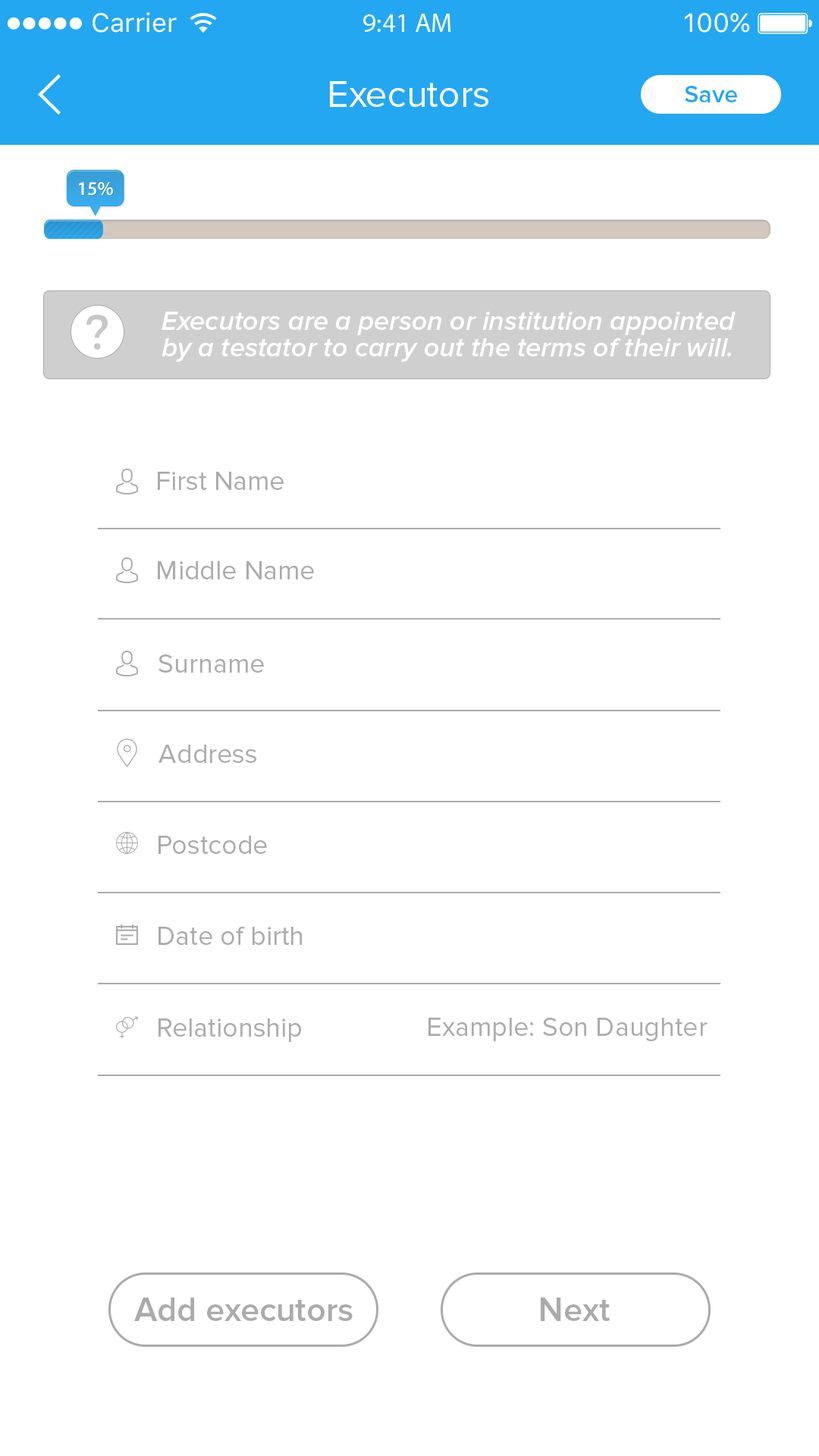
<style>
.page{position:relative;width:819px;height:1456px;background:#ffffff}
.page>*{position:absolute;margin:0}
.t1{font:38.1px "ProximaNova-Regular";color:#ffffff}
.t2{font:24.7px "ProximaNova-Semibold";color:#23a7f1}
.t3{font:19.2px "MyriadPro-Semibold";color:#ffffff}
.t4{font:48.9px "Montserrat-Regular";color:#c7c7c7;scale:1.05 1}
.t5{font:27.2px/26.5px "ProximaNova-SemiboldIt";color:#ffffff}
.t6{font:27.3px "ProximaNova-Regular";color:#ababad}
.t7{font:34.1px "ProximaNova-Semibold";color:#ababad}
</style>
<div class="page">
<p class="t1" style="left:330px;top:81px;width:158px;height:26px">Executors</p>
<p class="t2" style="left:685px;top:86px;width:52px;height:16px">Save</p>
<p class="t3" style="left:79px;top:182px;width:34px;height:14px">15%</p>
<p class="t4" style="left:86px;top:315px;width:22px;height:35px">?</p>
<p class="t5" style="left:162px;top:312px;width:574px;height:50px">Executors are a person or institution appointed <br>by a testator to carry out the terms of their will.</p>
<p class="t6" style="left:158px;top:472px;width:126px;height:18px">First Name</p>
<p class="t6" style="left:158px;top:561px;width:156px;height:18px">Middle Name</p>
<p class="t6" style="left:158px;top:654px;width:106px;height:19px">Surname</p>
<p class="t6" style="left:158px;top:745px;width:98px;height:18px">Address</p>
<p class="t6" style="left:158px;top:836px;width:109px;height:18px">Postcode</p>
<p class="t6" style="left:158px;top:927px;width:144px;height:18px">Date of birth</p>
<p class="t6" style="left:158px;top:1018px;width:143px;height:24px">Relationship</p>
<p class="t6" style="left:428px;top:1018px;width:280px;height:23px">Example: Son Daughter</p>
<p class="t7" style="left:134px;top:1297px;width:219px;height:24px">Add executors</p>
<p class="t7" style="left:541px;top:1297px;width:69px;height:24px">Next</p>
</div>
